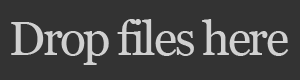
<style>
.page{position:relative;width:300px;height:80px;background:#333333}
.page>*{position:absolute;margin:0}
.t1{font:48px "Georgia";letter-spacing:-0.05em;color:#d1d1d1}
</style>
<div class="page">
<p class="t1" style="left:11px;top:19px;width:278px;height:46px">Drop files here</p>
</div>
